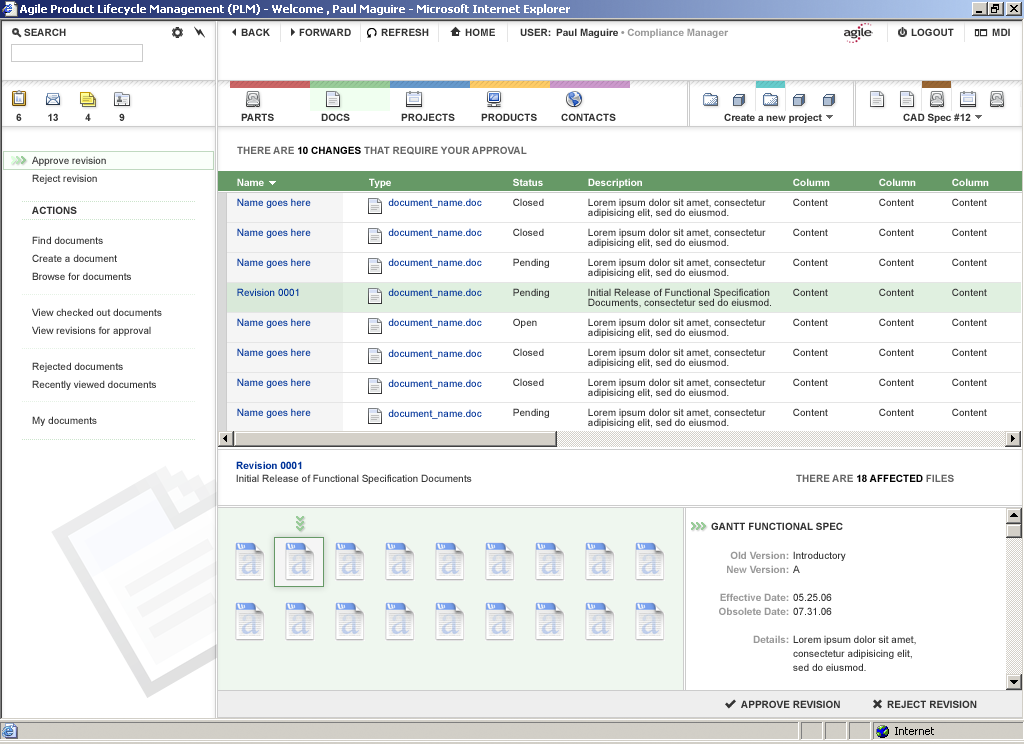
<style>
.page{position:relative;width:1024px;height:744px;background:#ffffff}
.page>*{position:absolute;margin:0}
.t1{font:10px "Arial-BoldMT";color:#666666}
.t2{font:10px "Arial-BoldMT";color:#000000}
.t3{font:10px/18px "ArialMT";color:#333333}
.t4{font:10px/10px "ArialMT";color:#003399}
.t5{font:10px "Arial-BoldMT";color:#ffffff}
.t6{font:10px/8px "Arial-BoldMT";color:#ffffff}
.t7{font:10px/10px "ArialMT";color:#333333}
.t8{font:10px "Arial-BoldMT";color:#333333}
.t9{font:10px/13px "ArialMT";color:#333333}
.t10{font:10px/12px "Arial-BoldMT";color:#003399}
.t11{font:10px "Arial-BoldMT";color:#333333;text-transform:uppercase}
.t12{font:10px/14px "Arial-BoldMT";color:#999999}
.t13{font:10px/11px "ArialMT";color:#333333}
.t14{font:10px/14px "ArialMT";color:#333333}
</style>
<div class="page">
<p class="t1" style="left:237px;top:146px;width:290px;height:9px">THERE ARE <span class="t2">10 CHANGES</span> THAT REQUIRE YOUR APPROVAL</p>
<p class="t3" style="left:32px;top:156px;width:74px;height:28px">Approve revision<br>Reject revision</p>
<p class="t4" style="left:237px;top:178px;width:74px;height:150px"><span class="t5">N</span><span class="t6">ame<br><br></span>Name goes here<br><br><br>Name goes here<br><br><br>Name goes here<br><br><br>Revision 0001<br><br><br>Name goes here</p>
<p class="t4" style="left:369px;top:178px;width:113px;height:150px"><span class="t5">Type<br><br></span>       document_name.doc<br><br><br>       document_name.doc<br><br><br>       document_name.doc<br><br><br>       document_name.doc<br><br> <br>       document_name.doc</p>
<p class="t7" style="left:513px;top:178px;width:36px;height:150px"><span class="t5">Status<br></span><br>Closed<br><br><br>Closed<br><br><br>Pending<br><br><br>Pending<br><br><br>Open</p>
<p class="t7" style="left:588px;top:178px;width:183px;height:160px"><span class="t5">De</span><span class="t6">scription<br></span><br>Lorem ipsum dolor sit amet, consectetur <br>adipisicing elit, sed do eiusmod.<br><br>Lorem ipsum dolor sit amet, consectetur <br>adipisicing elit, sed do eiusmod.<br><br>Lorem ipsum dolor sit amet, consectetur <br>adipisicing elit, sed do eiusmod.<br><br>Initial Release of Functional Specification<br>Documents, consectetur sed do eiusmod.<br><br>Lorem ipsum dolor sit amet, consectetur <br>adipisicing elit, sed do eiusmod.</p>
<p class="t7" style="left:793px;top:178px;width:37px;height:148px"><span class="t5">Column<br></span><br>Content<br><br><br>Content<br><br><br>Content<br><br><br>Content<br><br><br>Content</p>
<p class="t7" style="left:879px;top:178px;width:37px;height:148px"><span class="t5">Column<br><br></span>Content<br><br><br>Content<br><br><br>Content<br><br><br>Content<br><br><br>Content</p>
<p class="t7" style="left:952px;top:178px;width:37px;height:148px"><span class="t5">Column<br></span><br>Content<br><br><br>Content<br><br><br>Content<br><br><br>Content<br><br><br>Content</p>
<p class="t8" style="left:32px;top:206px;width:45px;height:8px">ACTIONS</p>
<p class="t3" style="left:32px;top:236px;width:130px;height:190px">Find documents<br>Create a document<br>Browse for documents<br><br>View checked out documents<br>View revisions for approval<br><br>Rejected documents<br>Recently viewed documents<br><br>My documents</p>
<p class="t4" style="left:237px;top:348px;width:74px;height:70px"><span class="t6"><br><br></span>Name goes here<br><br><br>Name goes here<br><br><br>Name goes here</p>
<p class="t4" style="left:388px;top:349px;width:94px;height:70px"><span class="t5"><br><br></span>       document_name.doc<br><br><br>       document_name.doc<br><br><br>       document_name.doc</p>
<p class="t7" style="left:513px;top:348px;width:36px;height:70px"><span class="t5"><br></span><br>Closed<br><br><br>Closed<br><br><br>Pending</p>
<p class="t7" style="left:588px;top:348px;width:178px;height:80px"><span class="t6"><br></span><br>Lorem ipsum dolor sit amet, consectetur <br>adipisicing elit, sed do eiusmod.<br><br>Lorem ipsum dolor sit amet, consectetur <br>adipisicing elit, sed do eiusmod.<br><br>Lorem ipsum dolor sit amet, consectetur <br>adipisicing elit, sed do eiusmod.</p>
<p class="t7" style="left:793px;top:348px;width:35px;height:68px"><span class="t5"><br></span><br>Content<br><br><br>Content<br><br><br>Content</p>
<p class="t7" style="left:879px;top:348px;width:35px;height:68px"><span class="t5"><br><br></span>Content<br><br><br>Content<br><br><br>Content</p>
<p class="t7" style="left:952px;top:348px;width:35px;height:68px"><span class="t5"><br></span><br>Content<br><br><br>Content<br><br><br>Content</p>
<p class="t9" style="left:236px;top:461px;width:236px;height:23px"><span class="t10">Revision 0001<br></span>Initial Release of Functional Specification Documents</p>
<p class="t2" style="left:796px;top:474px;width:158px;height:8px"><span class="t1">THERE ARE </span>18 AFFECTED<span class="t1"> FILES</span></p>
<p class="t11" style="left:711px;top:522px;width:132px;height:8px">Gantt Functional Spec</p>
<p class="t12" style="left:719px;top:551px;width:70px;height:92px;text-align:right">Old Version:<br>New Version:<br><br>Effective Date:<br>Obsolete Date:<br><br>Details:</p>
<p class="t13" style="left:793px;top:551px;width:123px;height:120px"><span class="t14">Introductory<br>A<br><br>05.25.06<br>07.31.06<br></span><br>Lorem ipsum dolor sit amet,<br>consectetur adipisicing elit, <br>sed do eiusmod.</p>
<p class="t8" style="left:741px;top:700px;width:99px;height:8px">APPROVE REVISION</p>
<p class="t8" style="left:887px;top:700px;width:90px;height:8px">REJECT REVISION</p>
</div>
